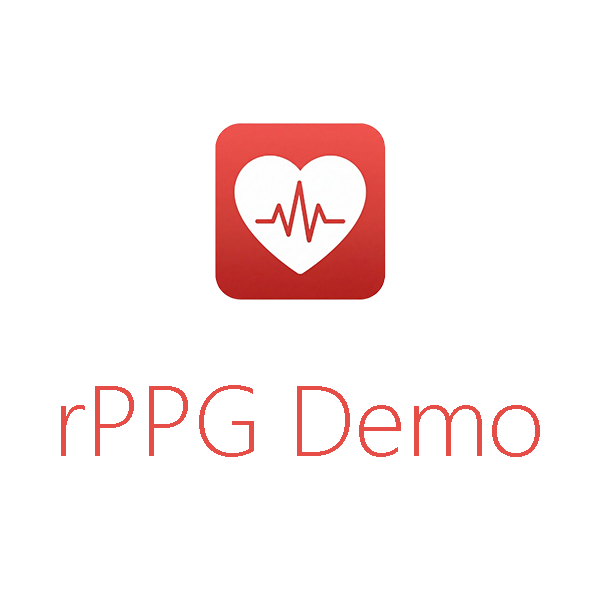
<style>
.page{position:relative;width:600px;height:600px;background:#ffffff}
.page>*{position:absolute;margin:0}
.t1{font:100px "SegoeUI-Light";color:#e64d46}
</style>
<div class="page">
<p class="t1" style="left:61px;top:385px;width:479px;height:72px">rPPG Demo</p>
</div>
